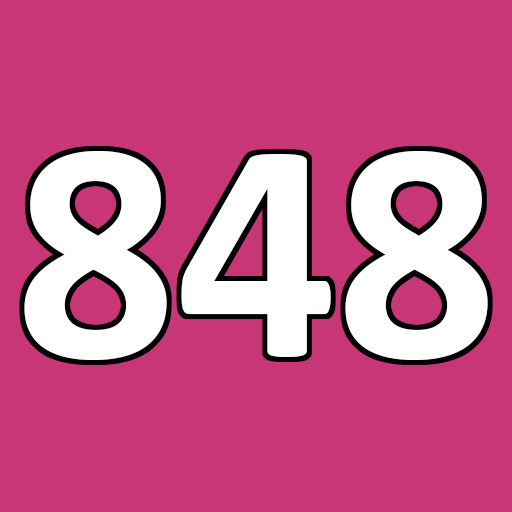
<style>
.page{position:relative;width:512px;height:512px;background:#c83678}
.page>*{position:absolute;margin:0}
.t1{font:317.5px "Calibri-Bold";color:#ffffff}
</style>
<div class="page">
<p class="t1" style="left:24px;top:151px;width:464px;height:209px">848</p>
</div>
